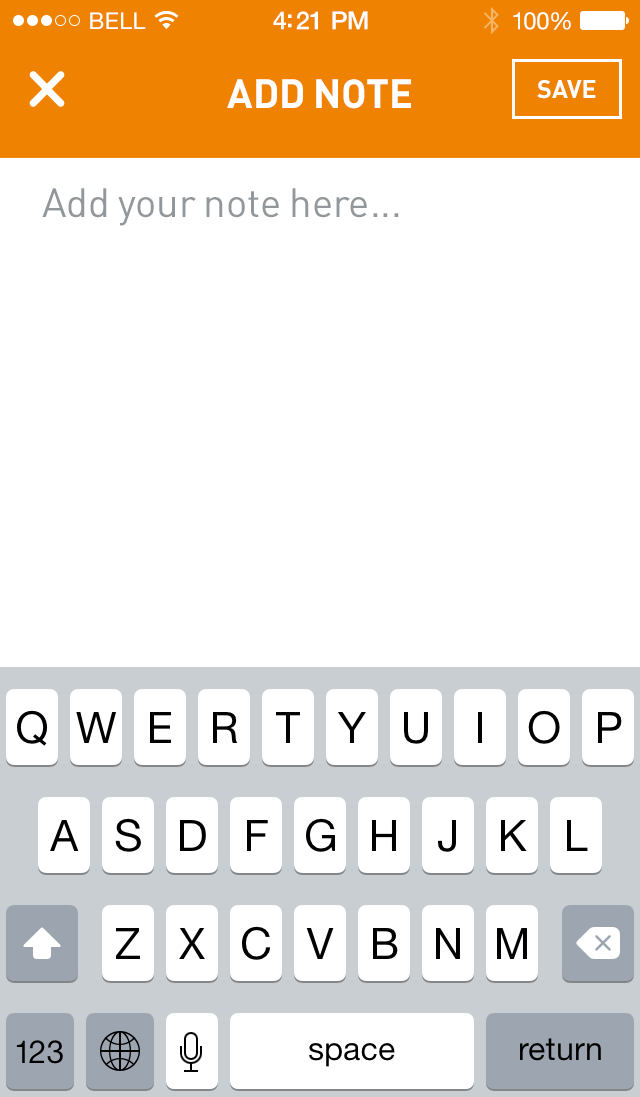
<style>
.page{position:relative;width:640px;height:1097px;background:#ffffff}
.page>*{position:absolute;margin:0}
.t1{font:23px "HelveticaNeue";letter-spacing:0.02em;color:#ffffff}
.t2{font:25px "HelveticaNeue-Medium";letter-spacing:-0.02em;color:#ffffff}
.t3{font:24px "HelveticaNeue";letter-spacing:-0.02em;color:#ffffff}
.t4{font:40px "DIN-Bold";color:#ffffff;text-transform:uppercase}
.t5{font:25px "DIN-Bold";color:#ffffff;text-transform:uppercase}
.t6{font:40px "DIN-Regular";color:#91979a}
</style>
<div class="page">
<p class="t1" style="left:90px;top:12px;width:56px;height:17px">BELL</p>
<p class="t2" style="left:273px;top:11px;width:95px;height:19px">4:21 PM</p>
<p class="t3" style="left:513px;top:12px;width:58px;height:18px">100%</p>
<p class="t4" style="left:227px;top:79px;width:184px;height:30px">add note</p>
<p class="t5" style="left:537px;top:80px;width:59px;height:19px">save</p>
<p class="t6" style="left:42px;top:188px;width:357px;height:38px">Add your note here...</p>
</div>
